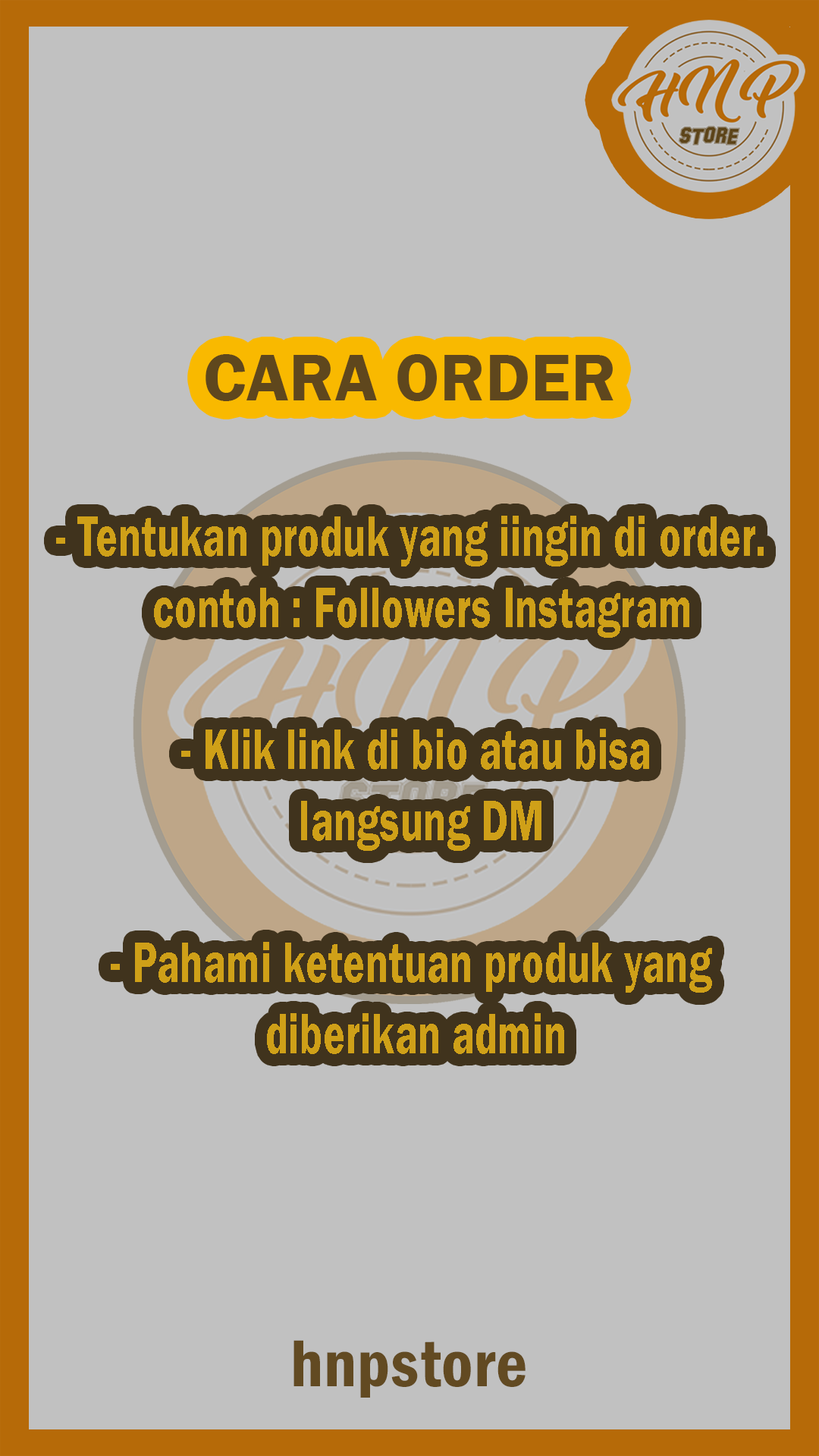
<style>
.page{position:relative;width:819px;height:1456px;background:#c1c1c1}
.page>*{position:absolute;margin:0}
.t1{font:68.5px "FranklinGothic-Demi";letter-spacing:0.01em;color:#5f471d}
.t2{font:59.2px "FranklinGothic-Demi";letter-spacing:0.01em;color:#cfa018;scale:0.7 1}
.t3{font:68.5px "FranklinGothic-DemiCond";letter-spacing:0.01em;color:#624a22}
</style>
<div class="page">
<p class="t1" style="left:206px;top:354px;width:407px;height:47px">CARA ORDER</p>
<p class="t2" style="left:56px;top:516px;width:708px;height:538px;text-align:center">- Tentukan produk yang iingin di order. <br> contoh : Followers Instagram<br><br>- Klik link di bio atau bisa<br> langsung DM<br><br>- Pahami ketentuan produk yang <br>diberikan admin</p>
<p class="t3" style="left:293px;top:1340px;width:233px;height:58px">hnpstore</p>
</div>
